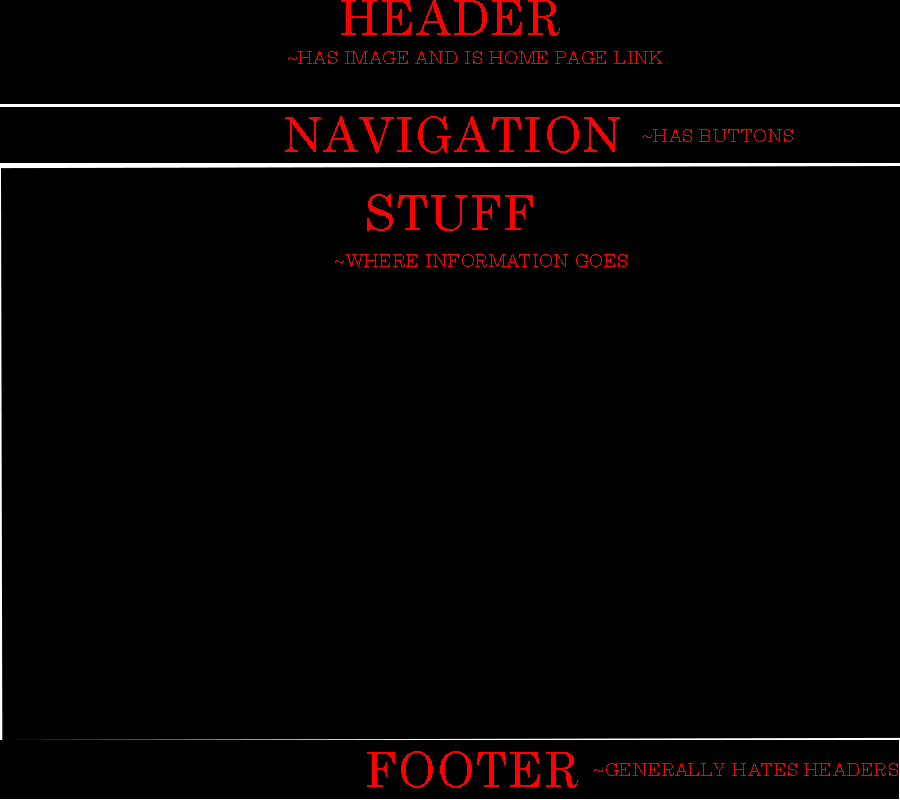
<style>
.page{position:relative;width:900px;height:800px;background:#000000}
.page>*{position:absolute;margin:0}
.t1{font:48px "CenturySchoolbook";letter-spacing:0.025em;color:#ff0000;text-transform:uppercase}
.t2{font:18px "CenturySchoolbook";letter-spacing:0.025em;color:#ff0000;text-transform:uppercase}
</style>
<div class="page">
<p class="t1" style="left:341px;top:0px;width:219px;height:36px">Header</p>
<p class="t2" style="left:288px;top:51px;width:374px;height:13px">~has image and is home page link</p>
<p class="t1" style="left:285px;top:116px;width:335px;height:37px">Navigation</p>
<p class="t2" style="left:643px;top:129px;width:150px;height:13px">~has buttons</p>
<p class="t1" style="left:367px;top:194px;width:166px;height:37px">Stuff</p>
<p class="t2" style="left:335px;top:254px;width:292px;height:13px">~where information goes</p>
<p class="t1" style="left:367px;top:751px;width:211px;height:37px">Footer</p>
<p class="t2" style="left:594px;top:763px;width:304px;height:13px">~generally hates headers</p>
</div>
